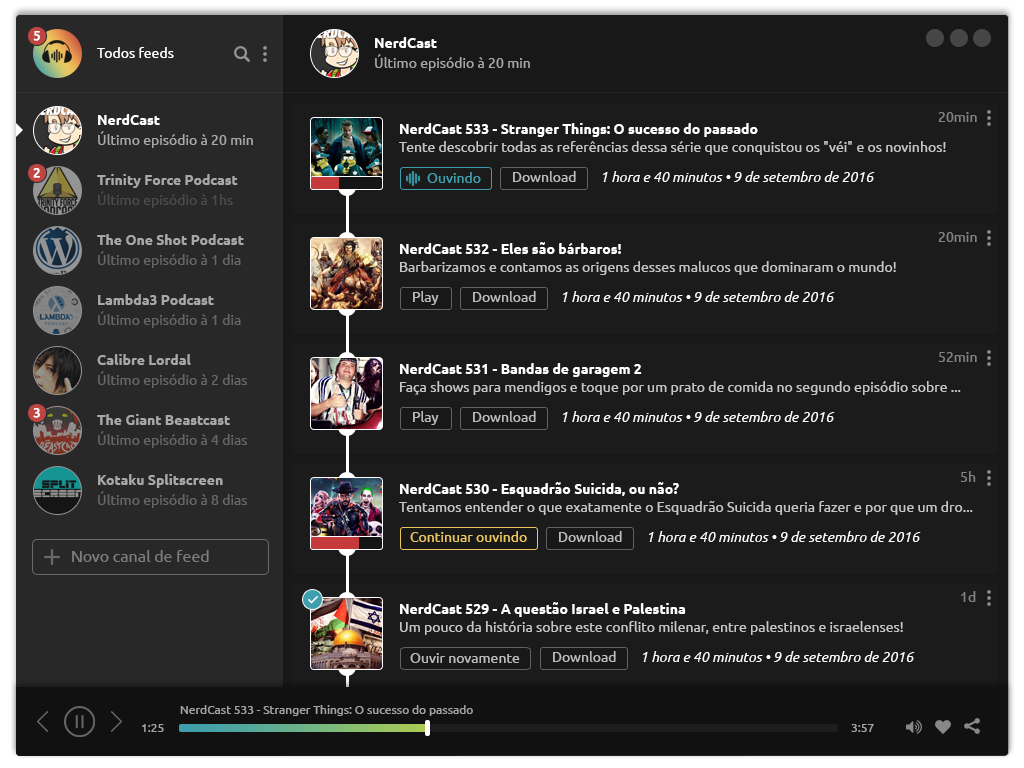
<style>
.page{position:relative;width:1024px;height:768px;background:#1a1b1a}
.page>*{position:absolute;margin:0}
.t1{font:13px "Ubuntu";color:#ffffff;font-weight:bold}
.t2{font:14px "Ubuntu-Bold";color:#ffffff}
.t3{font:14px "Ubuntu";color:#ffffff}
.t4{font:14px "Ubuntu";color:#a5a5a5}
.t5{font:14px "Ubuntu";color:#818181}
.t6{font:14px/18px "Ubuntu";color:#c6c6c6}
.t7{font:14px/18px "Ubuntu-Bold";color:#ffffff}
.t8{font:14px "Ubuntu";color:#a8a8a8}
.t9{font:14px "Ubuntu-Bold";color:#a8a8a8}
.t10{font:14px "Ubuntu";color:#3f9faf}
.t11{font:14px "Ubuntu";color:#bbbbbb}
.t12{font:14px "Ubuntu-Italic";color:#ffffff}
.t13{font:14px "Ubuntu";color:#4b4b4b}
.t14{font:14px "Ubuntu";color:#666666}
.t15{font:14px "Ubuntu";color:#ebc761}
.t16{font:16px "Ubuntu";color:#7e7e7e}
.t17{font:12px "Ubuntu";color:#a3a4a3}
</style>
<div class="page">
<p class="t1" style="left:33px;top:31px;width:7px;height:10px">5</p>
<p class="t2" style="left:375px;top:37px;width:62px;height:11px">NerdCast</p>
<p class="t3" style="left:97px;top:47px;width:77px;height:11px">Todos feeds</p>
<p class="t4" style="left:375px;top:54px;width:155px;height:17px">Último episódio à 20 min</p>
<p class="t5" style="left:938px;top:112px;width:39px;height:10px">20min</p>
<p class="t2" style="left:98px;top:114px;width:62px;height:11px">NerdCast</p>
<p class="t6" style="left:399px;top:123px;width:547px;height:32px"><span class="t7">NerdCast 533 - Stranger Things: O sucesso do passado<br></span>Tente descobrir todas as referências dessa série que conquistou os "véi" e os novinhos!</p>
<p class="t8" style="left:98px;top:131px;width:155px;height:17px">Último episódio à 20 min</p>
<p class="t1" style="left:33px;top:168px;width:7px;height:10px">2</p>
<p class="t9" style="left:97px;top:174px;width:141px;height:14px">Trinity Force Podcast</p>
<p class="t10" style="left:427px;top:172px;width:54px;height:11px">Ouvindo</p>
<p class="t11" style="left:513px;top:171px;width:63px;height:11px">Download</p>
<p class="t12" style="left:603px;top:171px;width:272px;height:11px">1 hora e 40 minutos • 9 de setembro de 2016</p>
<p class="t13" style="left:98px;top:191px;width:135px;height:17px">Último episódio à 1hs</p>
<p class="t5" style="left:938px;top:232px;width:39px;height:10px">20min</p>
<p class="t9" style="left:97px;top:234px;width:147px;height:11px">The One Shot Podcast</p>
<p class="t6" style="left:400px;top:242px;width:496px;height:33px"><span class="t7">NerdCast 532 - Eles são bárbaros!<br></span>Barbarizamos e contamos as origens desses malucos que dominaram o mundo!</p>
<p class="t14" style="left:98px;top:251px;width:143px;height:17px">Último episódio à 1 dia</p>
<p class="t9" style="left:98px;top:294px;width:116px;height:11px">Lambda3 Podcast</p>
<p class="t11" style="left:413px;top:291px;width:26px;height:14px">Play</p>
<p class="t11" style="left:473px;top:291px;width:63px;height:11px">Download</p>
<p class="t12" style="left:563px;top:291px;width:272px;height:11px">1 hora e 40 minutos • 9 de setembro de 2016</p>
<p class="t14" style="left:98px;top:311px;width:143px;height:17px">Último episódio à 1 dia</p>
<p class="t5" style="left:938px;top:352px;width:39px;height:10px">52min</p>
<p class="t9" style="left:97px;top:354px;width:94px;height:11px">Calibre Lordal</p>
<p class="t6" style="left:400px;top:363px;width:561px;height:32px"><span class="t7">NerdCast 531 - Bandas de garagem 2<br></span>Faça shows para mendigos e toque por um prato de comida no segundo episódio sobre ...</p>
<p class="t14" style="left:98px;top:371px;width:149px;height:17px">Último episódio à 2 dias</p>
<p class="t1" style="left:33px;top:408px;width:7px;height:10px">3</p>
<p class="t9" style="left:97px;top:414px;width:133px;height:11px">The Giant Beastcast</p>
<p class="t11" style="left:413px;top:411px;width:26px;height:14px">Play</p>
<p class="t11" style="left:473px;top:411px;width:63px;height:11px">Download</p>
<p class="t12" style="left:563px;top:411px;width:272px;height:11px">1 hora e 40 minutos • 9 de setembro de 2016</p>
<p class="t14" style="left:98px;top:431px;width:149px;height:17px">Último episódio à 4 dias</p>
<p class="t5" style="left:960px;top:471px;width:16px;height:11px">5h</p>
<p class="t9" style="left:98px;top:474px;width:125px;height:14px">Kotaku Splitscreen</p>
<p class="t6" style="left:399px;top:482px;width:574px;height:33px"><span class="t7">NerdCast 530 - Esquadrão Suicida, ou não?<br></span>Tentamos entender o que exatamente o Esquadrão Suicida queria fazer e por que um dro...</p>
<p class="t14" style="left:98px;top:491px;width:149px;height:17px">Último episódio à 8 dias</p>
<p class="t15" style="left:410px;top:531px;width:117px;height:11px">Continuar ouvindo</p>
<p class="t11" style="left:559px;top:531px;width:63px;height:11px">Download</p>
<p class="t12" style="left:649px;top:531px;width:272px;height:11px">1 hora e 40 minutos • 9 de setembro de 2016</p>
<p class="t16" style="left:72px;top:550px;width:137px;height:12px">Novo canal de feed</p>
<p class="t5" style="left:961px;top:591px;width:15px;height:11px">1d</p>
<p class="t6" style="left:400px;top:602px;width:503px;height:33px"><span class="t7">NerdCast 529 - A questão Israel e Palestina<br></span>Um pouco da história sobre este conflito milenar, entre palestinos e israelenses!</p>
<p class="t11" style="left:410px;top:653px;width:110px;height:10px">Ouvir novamente</p>
<p class="t11" style="left:553px;top:651px;width:63px;height:11px">Download</p>
<p class="t12" style="left:643px;top:651px;width:272px;height:11px">1 hora e 40 minutos • 9 de setembro de 2016</p>
<p class="t17" style="left:180px;top:705px;width:293px;height:11px">NerdCast 533 - Stranger Things: O sucesso do passado</p>
<p class="t17" style="left:142px;top:724px;width:22px;height:8px">1:25</p>
<p class="t17" style="left:851px;top:724px;width:23px;height:8px">3:57</p>
</div>
